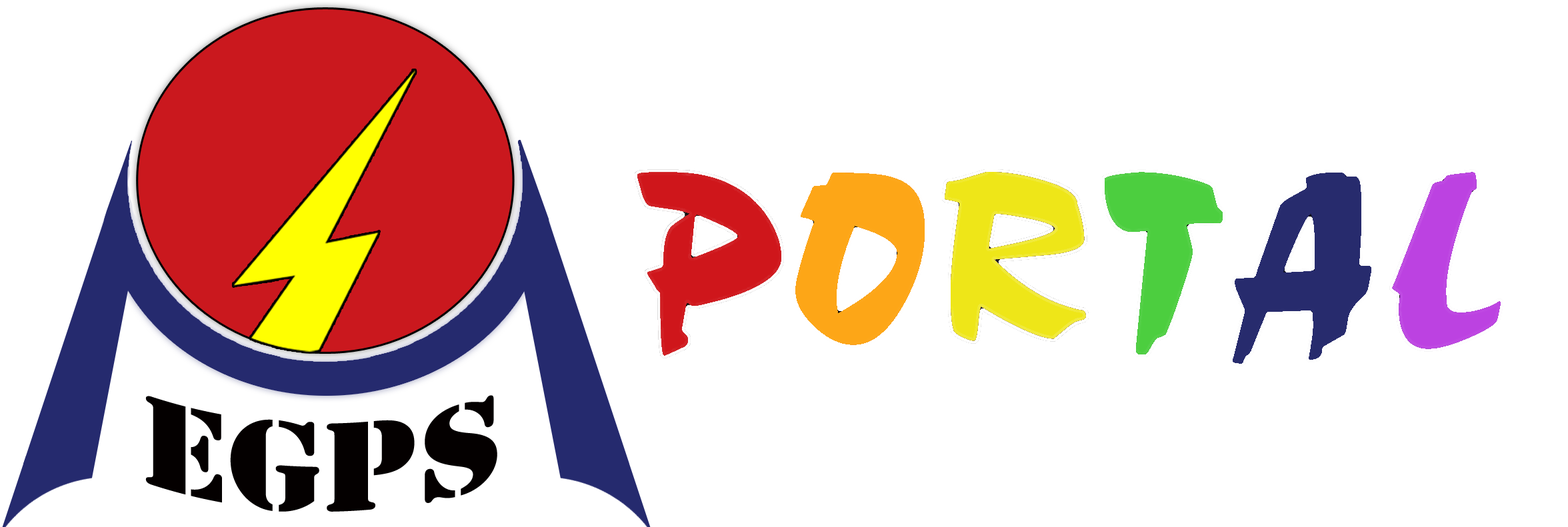
<style>
.page{position:relative;width:1568px;height:527px;background:#ffffff}
.page>*{position:absolute;margin:0}
.t1{font:246.9px "Chokko"}
</style>
<div class="page">
<p class="t1" style="left:637px;top:172px;width:864px;height:192px">PORTAL</p>
</div>
